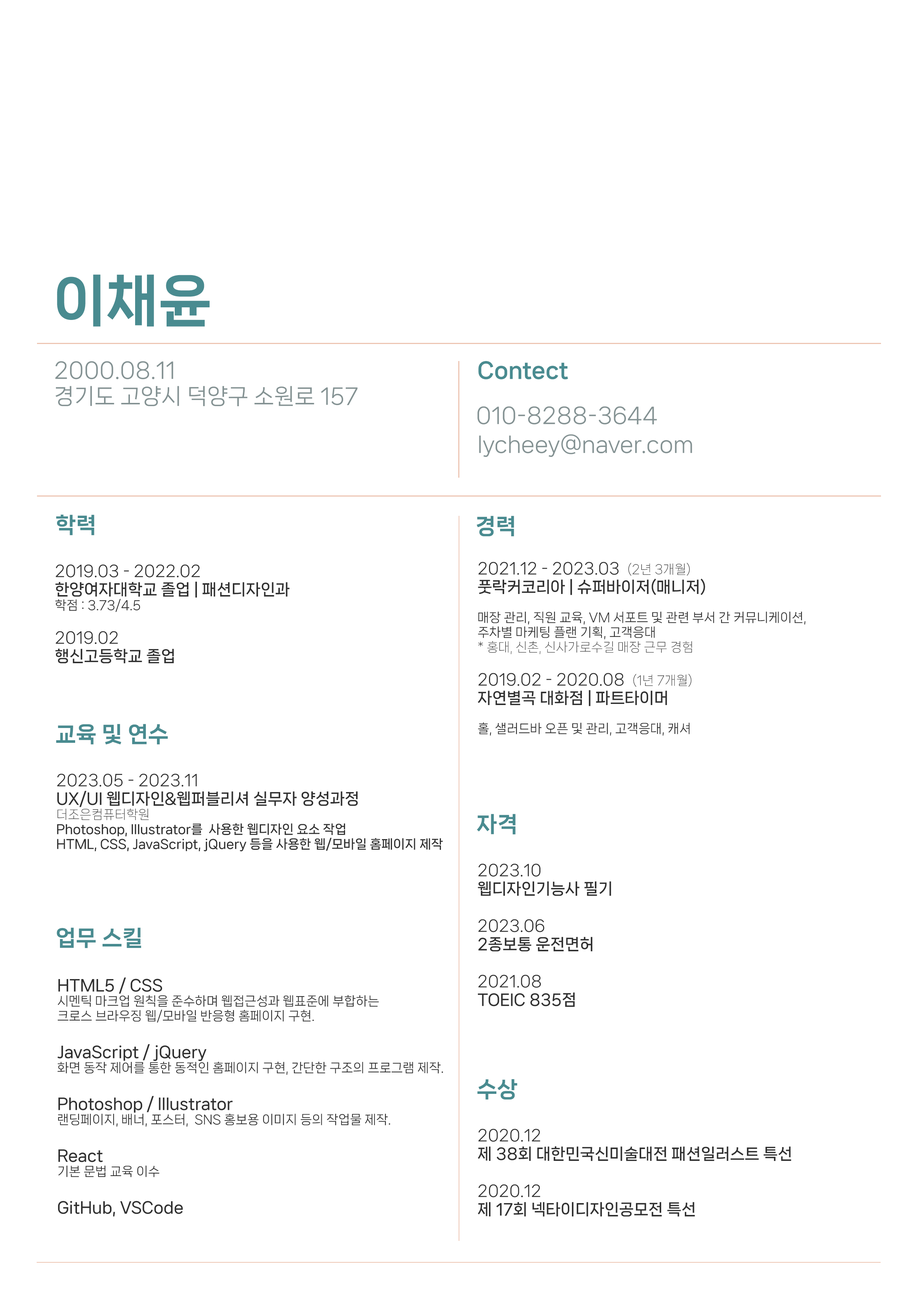
<style>
.page{position:relative;width:918px;height:1299px;background:#ffffff}
.page>*{position:absolute;margin:0}
.t1{font:55.5px "NanumSquareNeoTTF-dEb";color:#498b90}
.t2{font:21.6px "NanumSquareNeoTTF-bRg";color:#849293}
.t3{font:21.6px "NanumSquareNeoTTF-dEb";color:#498b90}
.t4{font:15.4px "NanumSquareNeoTTF-cBd";color:#303030}
.t5{font:15.4px "NanumSquareNeoTTF-bRg";color:#303030}
.t6{font:12.3px "NanumSquareNeoTTF-bRg";color:#303030}
.t7{font:12.3px "NanumSquareNeoTTF-aLt";color:#303030}
.t8{font:12.3px "NanumSquareNeoTTF-cBd";color:#303030}
</style>
<div class="page">
<p class="t1" style="left:57px;top:274px;width:153px;height:53px">이채윤</p>
<p class="t2" style="left:55px;top:361px;width:118px;height:18px">2000.08.11</p>
<p class="t3" style="left:478px;top:361px;width:90px;height:18px">Contect</p>
<p class="t2" style="left:56px;top:386px;width:302px;height:20px">경기도 고양시 덕양구 소원로 157</p>
<p class="t2" style="left:478px;top:406px;width:179px;height:18px">010-8288-3644</p>
<p class="t2" style="left:479px;top:434px;width:213px;height:23px">lycheey@naver.com</p>
<p class="t3" style="left:56px;top:514px;width:38px;height:21px">학력</p>
<p class="t3" style="left:476px;top:516px;width:38px;height:20px">경력</p>
<p class="t4" style="left:55px;top:564px;width:235px;height:99px"><span class="t5">2019.03 - 2022.02<br></span>한양여자대학교 졸업 | 패션디자인과<br><span class="t6">학점 : 3.73/4.5<br><br></span><span class="t5">2019.02<br></span>행신고등학교 졸업</p>
<p class="t6" style="left:478px;top:562px;width:328px;height:174px"><span class="t5">2021.12 - 2023.03  </span><span class="t7">(2년 3개월)<br></span><span class="t4">풋락커코리아 | 슈퍼바이저(매니저)<br></span><br>매장 관리, 직원 교육, VM 서포트 및 관련 부서 간 커뮤니케이션, <br>주차별 마케팅 플랜 기획, 고객응대<br><span class="t7">* 홍대, 신촌, 신사가로수길 매장 근무 경험<br><br></span><span class="t5">2019.02 - 2020.08  </span><span class="t7">(1년 7개월)<br></span><span class="t4">자연별곡 대화점 | 파트타이머 <br></span><br>홀, 샐러드바 오픈 및 관리, 고객응대, 캐셔</p>
<p class="t3" style="left:56px;top:724px;width:112px;height:21px">교육 및 연수</p>
<p class="t8" style="left:57px;top:773px;width:386px;height:78px"><span class="t5">2023.05 - 2023.11<br></span><span class="t4">UX/UI 웹디자인&amp;웹퍼블리셔 실무자 양성과정<br></span><span class="t7">더조은컴퓨터학원<br></span>Photoshop, Illustrator를  사용한 웹디자인 요소 작업<br>HTML, CSS, JavaScript, jQuery 등을 사용한 웹/모바일 홈페이지 제작</p>
<p class="t3" style="left:477px;top:814px;width:39px;height:20px">자격</p>
<p class="t4" style="left:478px;top:863px;width:133px;height:144px"><span class="t5">2023.10<br></span>웹디자인기능사 필기<br><br><span class="t5">2023.06<br></span>2종보통 운전면허<br><br><span class="t5">2021.08<br></span>TOEIC 835점</p>
<p class="t3" style="left:57px;top:927px;width:84px;height:21px">업무 스킬</p>
<p class="t6" style="left:57px;top:977px;width:386px;height:239px"><span class="t4">HTML5 / CSS<br></span>시멘틱 마크업 원칙을 준수하며 웹접근성과 웹표준에 부합하는 <br>크로스 브라우징 웹/모바일 반응형 홈페이지 구현.<br><br><span class="t4">JavaScript / jQuery<br></span>화면 동작 제어를 통한 동적인 홈페이지 구현, 간단한 구조의 프로그램 제작.<br><br><span class="t4">Photoshop / Illustrator<br></span>랜딩페이지, 배너, 포스터,  SNS 홍보용 이미지 등의 작업물 제작.<br><br><span class="t4">React<br></span>기본 문법 교육 이수<br><span class="t4"> <br>GitHub, VSCode</span></p>
<p class="t3" style="left:477px;top:1079px;width:41px;height:21px">수상</p>
<p class="t4" style="left:478px;top:1128px;width:314px;height:89px"><span class="t5">2020.12<br></span>제 38회 대한민국신미술대전 패션일러스트 특선 <br><br><span class="t5">2020.12<br></span>제 17회 넥타이디자인공모전 특선</p>
</div>
